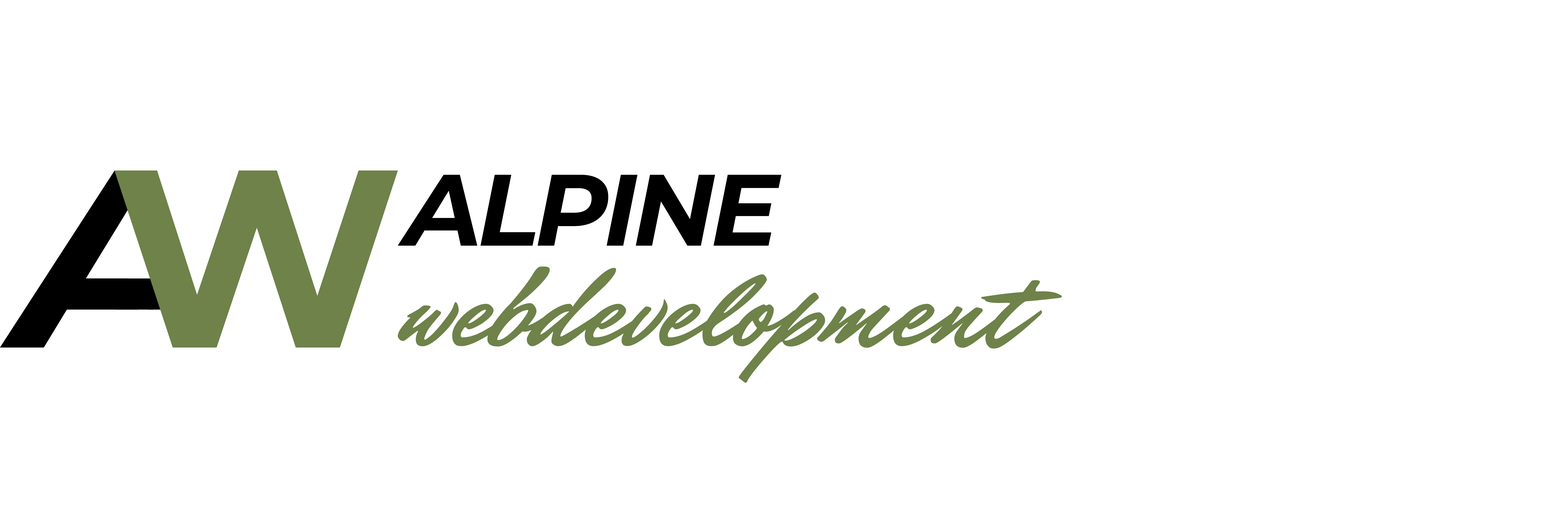
<style>
.page{position:relative;width:1568px;height:518px;background:#ffffff}
.page>*{position:absolute;margin:0}
.t1{font:253px "Montserrat-BoldItalic";letter-spacing:-0.04em}
.t2{font:253px "Montserrat-Bold";letter-spacing:-0.04em;color:#6e8249}
.t3{font:101.2px "Montserrat-BoldItalic";letter-spacing:-0.04em;color:#000000}
.t4{font:113.9px "MrDafoe-Regular";color:#6e8249}
</style>
<div class="page">
<p class="t1" style="left:0px;top:171px;width:199px;height:177px">A</p>
<p class="t2" style="left:114px;top:171px;width:284px;height:177px">W</p>
<p class="t3" style="left:398px;top:175px;width:383px;height:71px">ALPINE</p>
<p class="t4" style="left:398px;top:266px;width:664px;height:117px">webdevelopment</p>
</div>
